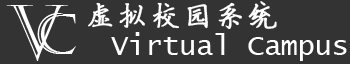
<style>
.page{position:relative;width:350px;height:64px;background:#333333}
.page>*{position:absolute;margin:0}
.t1{font:75.6px "Castellar";letter-spacing:0.075em;color:#ffffff}
.t2{font:29.3px "FZYBKSJW--GB1-0";letter-spacing:0.075em;color:#ffffff;font-weight:bold}
.t3{font:56px "Castellar";letter-spacing:0.075em;color:#ffffff}
.t4{font:29.3px "LucidaConsole";letter-spacing:-0.025em;color:#ffffff}
</style>
<div class="page">
<p class="t1" style="left:6px;top:5px;width:62px;height:56px">V</p>
<p class="t2" style="left:88px;top:1px;width:189px;height:28px">虚拟校园系统</p>
<p class="t3" style="left:37px;top:13px;width:39px;height:41px">C</p>
<p class="t4" style="left:111px;top:32px;width:236px;height:29px">Virtual Campus</p>
</div>
